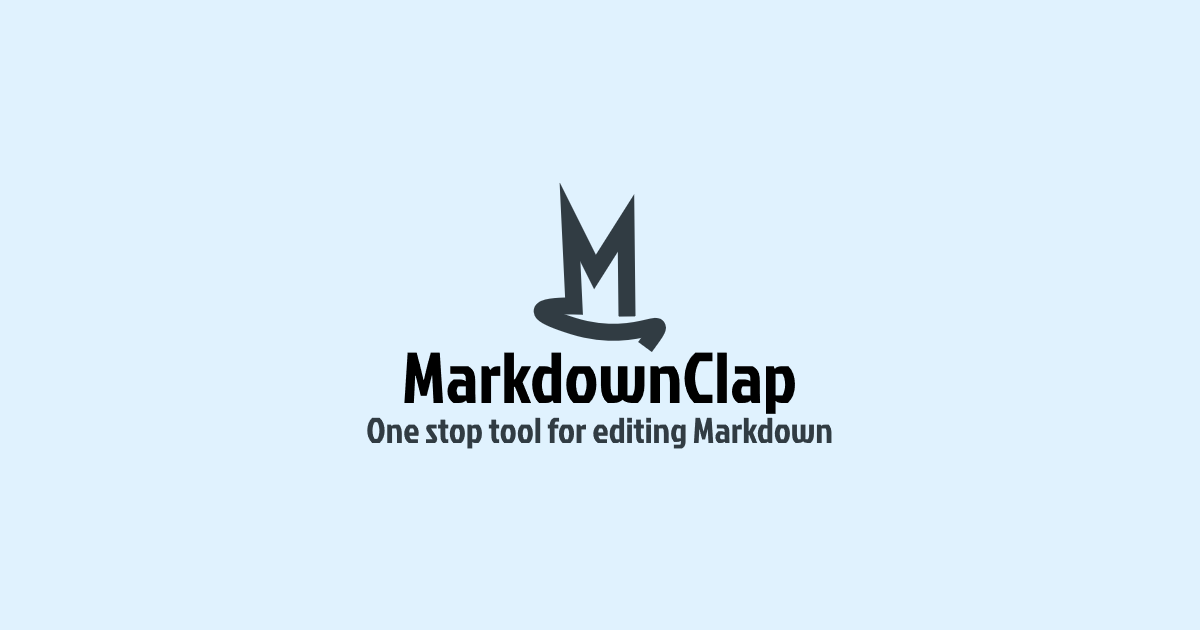
<style>
.page{position:relative;width:1200px;height:630px;background:#e0f2fe}
.page>*{position:absolute;margin:0}
.t1{font:72px "JockeyOne-Regular";color:#000000}
.t2{font:36px "JockeyOne-Regular";color:#313c43}
</style>
<div class="page">
<p class="t1" style="left:404px;top:352px;width:391px;height:62px">MarkdownClap</p>
<p class="t2" style="left:367px;top:417px;width:465px;height:32px">One stop tool for editing Markdown</p>
</div>
